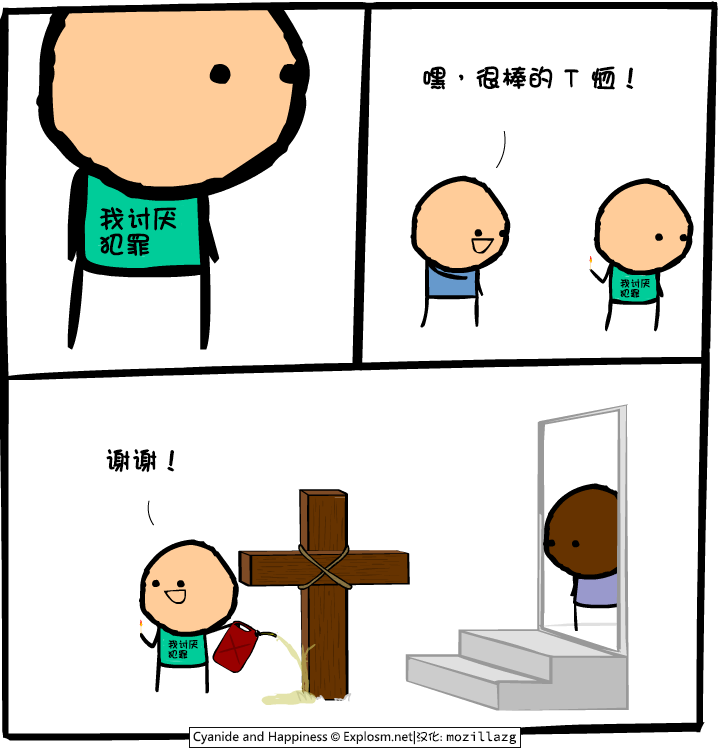
<style>
.page{position:relative;width:720px;height:750px;background:#ffffff}
.page>*{position:absolute;margin:0}
.t1{font:26px "DFGirl";color:#000000;font-weight:bold}
.t2{font:26px/26px "DFGirl";color:#000000;font-weight:bold}
.t3{font:10px/10px "DFGirl";color:#000000;font-weight:bold}
</style>
<div class="page">
<p class="t1" style="left:423px;top:66px;width:211px;height:24px">嘿，很棒的 T 恤！</p>
<p class="t2" style="left:99px;top:206px;width:78px;height:51px">我讨厌<br>犯罪</p>
<p class="t3" style="left:620px;top:278px;width:30px;height:20px">我讨厌<br>犯罪</p>
<p class="t1" style="left:106px;top:449px;width:69px;height:24px">谢谢！</p>
<p class="t3" style="left:168px;top:639px;width:30px;height:20px">我讨厌<br>犯罪</p>
</div>
